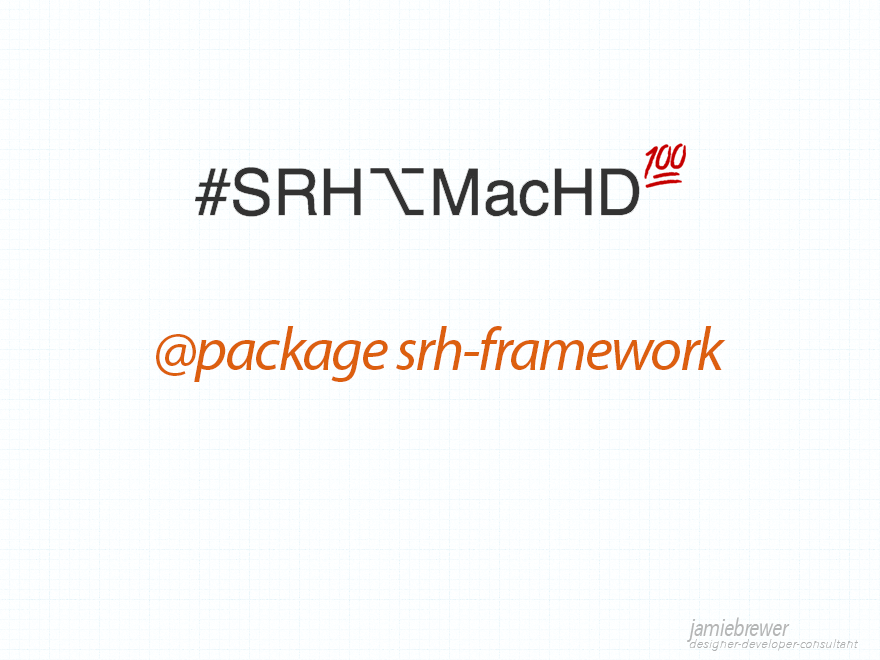
<style>
.page{position:relative;width:880px;height:660px;background:#fdffff}
.page>*{position:absolute;margin:0}
.t1{font:60.7px "MyriadPro-It";letter-spacing:-0.04em;color:#dc5f0f}
.t2{font:12.3px/12.3px "AvenirNextCondensed-UltraLightItalic";color:#b4b6b6;scale:1.41 1}
.t3{font:25.3px/12.3px "AvenirNextCondensed-Italic";letter-spacing:-0.04em;color:#b4b6b6}
</style>
<div class="page">
<p class="t1" style="left:156px;top:326px;width:570px;height:56px">@package srh-framework</p>
<p class="t2" style="left:687px;top:617px;width:171px;height:34px"><span class="t3">jamiebrewer<br></span>designer-developer-consultant</p>
</div>
